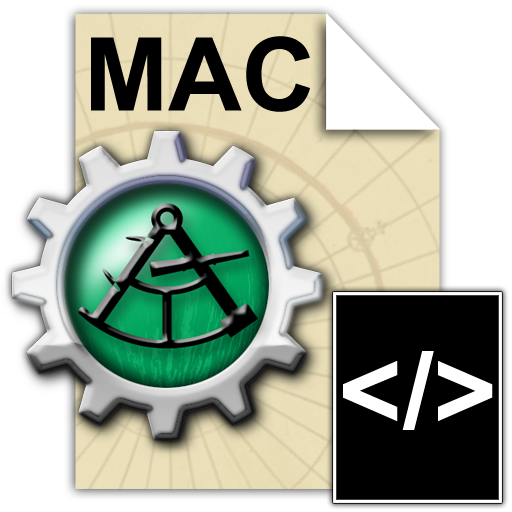
<style>
.page{position:relative;width:512px;height:512px;background:#ffffff}
.page>*{position:absolute;margin:0}
.t1{font:101.5px "Arial-BoldMT";color:#000000}
.t2{font:110px "Arial-BoldMT";color:#ffffff}
</style>
<div class="page">
<p class="t1" style="left:91px;top:36px;width:219px;height:76px">MAC</p>
<p class="t2" style="left:343px;top:351px;width:150px;height:79px">&lt;/&gt;</p>
</div>
